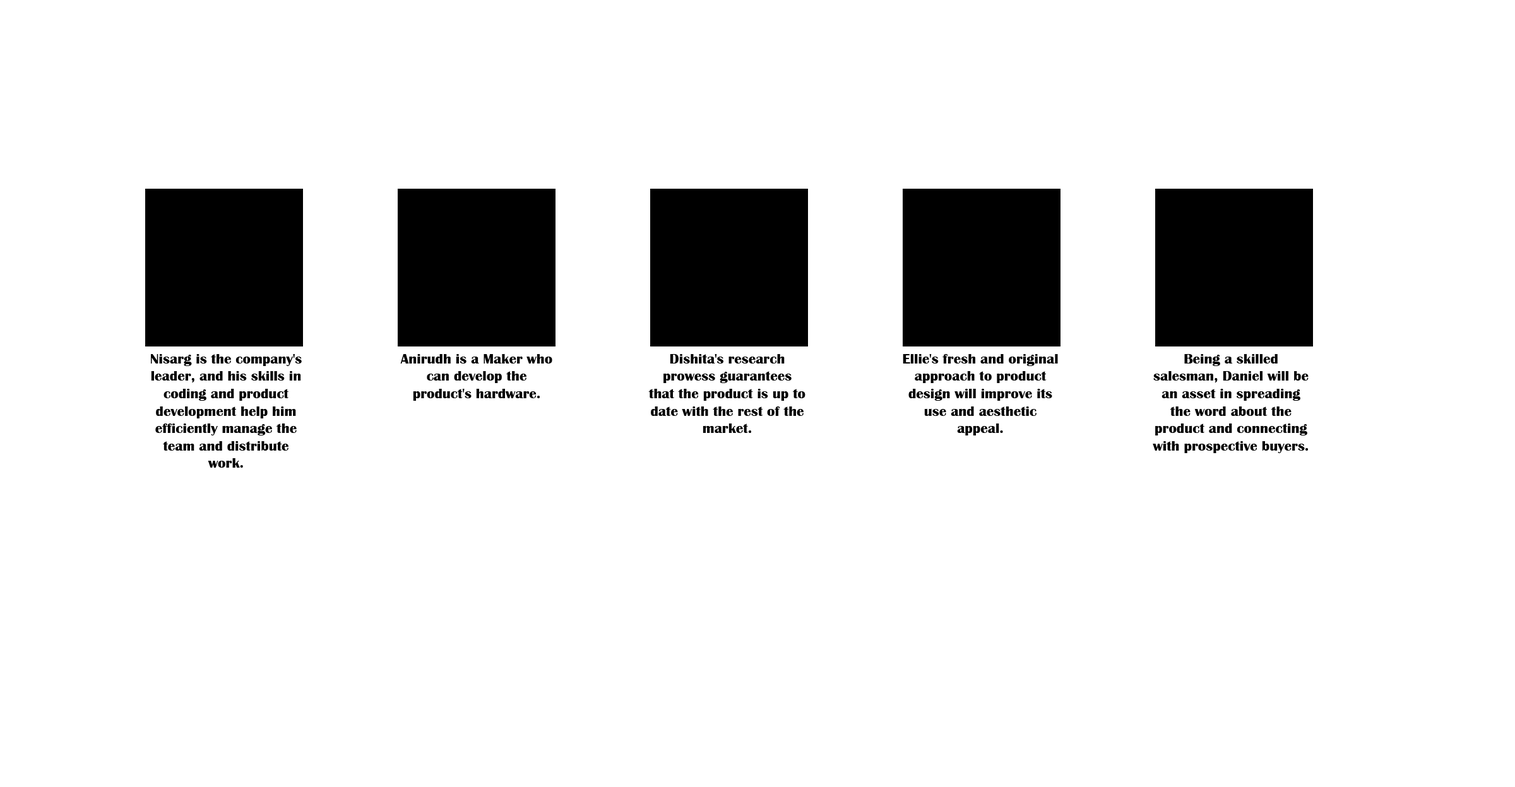
<style>
.page{position:relative;width:1515px;height:787px;background:#ffffff}
.page>*{position:absolute;margin:0}
.t1{font:14.5px "BritannicBold";color:#000000}
</style>
<div class="page">
<p class="t1" style="left:400px;top:353px;width:152px;height:48px;text-align:center">Anirudh is a Maker who can develop the product's hardware.</p>
<p class="t1" style="left:1153px;top:353px;width:156px;height:100px;text-align:center">Being a skilled salesman, Daniel will be an asset in spreading the word about the product and connecting with prospective buyers.</p>
<p class="t1" style="left:151px;top:354px;width:151px;height:114px;text-align:center">Nisarg is the company's leader, and his skills in coding and product development help him efficiently manage the team and distribute work.</p>
<p class="t1" style="left:648px;top:354px;width:157px;height:79px;text-align:center">Dishita's research prowess guarantees that the product is up to date with the rest of the market.</p>
<p class="t1" style="left:903px;top:354px;width:155px;height:82px;text-align:center">Ellie's fresh and original approach to product design will improve its use and aesthetic appeal.</p>
</div>
